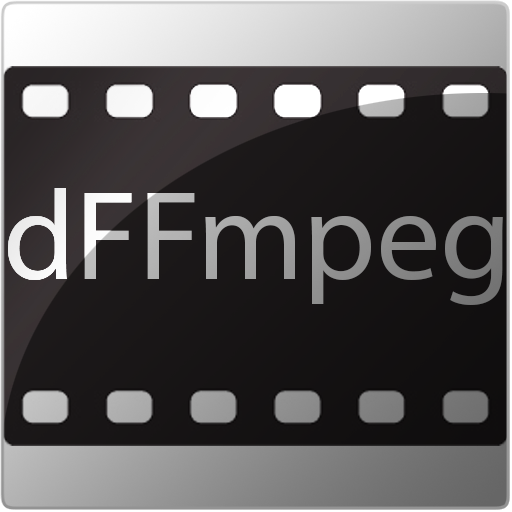
<style>
.page{position:relative;width:512px;height:512px}
.page>*{position:absolute;margin:0}
.t1{font:128px "MyriadPro-Regular"}
</style>
<div class="page">
<p class="t1" style="left:8px;top:188px;width:495px;height:117px">dFFmpeg</p>
</div>
